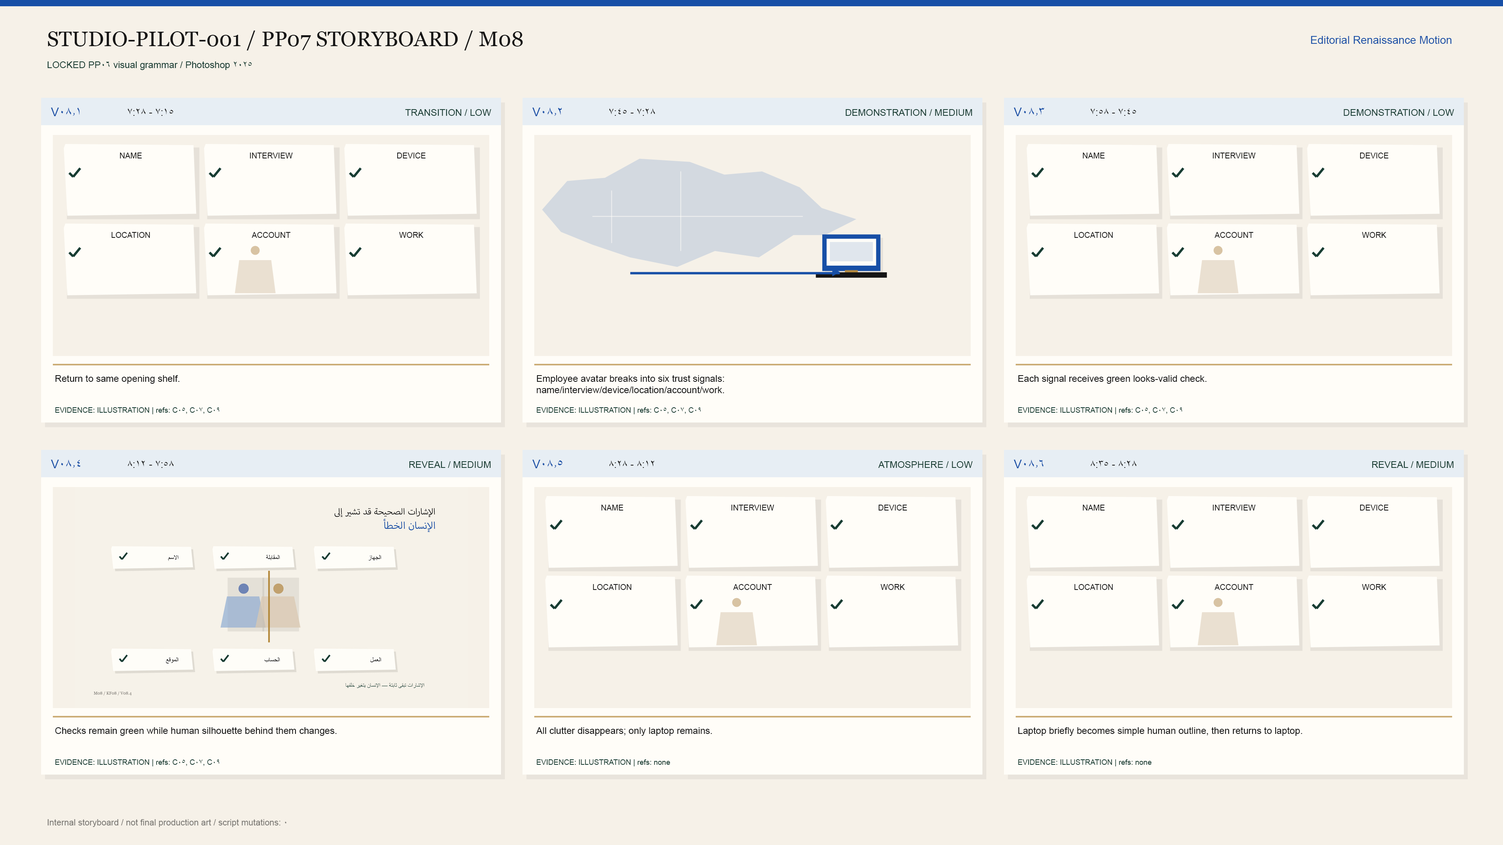
<style>
.page{position:relative;width:1503px;height:845px;background:#f6f1e8}
.page>*{position:absolute;margin:0}
.t1{font:21.1px "Georgia";color:#151515}
.t2{font:11px "ArialMT";color:#174fa6}
.t3{font:9.4px "ArialMT";color:#173c32}
.t4{font:12.1px "ArialMT";color:#174fa6}
.t5{font:10.2px "ArialMT";color:#151515}
.t6{font:7.8px "ArialMT";color:#151515}
.t7{font:20.9px "ArialMT";color:#d8c3a3}
.t8{font:9.4px "ArialMT";color:#151515}
.t9{font:7.4px "ArialMT";color:#173c32}
.t10{font:8.6px "ArialMT";color:#7b7974}
</style>
<div class="page">
<p class="t1" style="left:48px;top:31px;width:475px;height:19px">STUDIO-PILOT-001 / PP07 STORYBOARD / M08</p>
<p class="t2" style="left:1310px;top:36px;width:141px;height:8px">Editorial Renaissance Motion</p>
<p class="t3" style="left:47px;top:61px;width:205px;height:9px">LOCKED PP06 visual grammar / Photoshop 2025</p>
<p class="t4" style="left:51px;top:108px;width:29px;height:8px">V08.1</p>
<p class="t5" style="left:128px;top:108px;width:45px;height:8px">7:15 - 7:28</p>
<p class="t3" style="left:405px;top:109px;width:86px;height:7px">TRANSITION / LOW</p>
<p class="t4" style="left:532px;top:108px;width:30px;height:8px">V08.2</p>
<p class="t5" style="left:609px;top:108px;width:46px;height:8px">7:28 - 7:45</p>
<p class="t3" style="left:845px;top:109px;width:127px;height:7px">DEMONSTRATION / MEDIUM</p>
<p class="t4" style="left:1013px;top:108px;width:31px;height:8px">V08.3</p>
<p class="t5" style="left:1090px;top:108px;width:46px;height:8px">7:45 - 7:58</p>
<p class="t3" style="left:1343px;top:109px;width:111px;height:7px">DEMONSTRATION / LOW</p>
<p class="t6" style="left:120px;top:153px;width:22px;height:5px">NAME</p>
<p class="t6" style="left:250px;top:153px;width:43px;height:5px">INTERVIEW</p>
<p class="t6" style="left:397px;top:153px;width:29px;height:5px">DEVICE</p>
<p class="t6" style="left:1082px;top:153px;width:23px;height:5px">NAME</p>
<p class="t6" style="left:1212px;top:153px;width:43px;height:5px">INTERVIEW</p>
<p class="t6" style="left:1359px;top:153px;width:29px;height:5px">DEVICE</p>
<p class="t6" style="left:112px;top:232px;width:38px;height:6px">LOCATION</p>
<p class="t6" style="left:252px;top:232px;width:38px;height:6px">ACCOUNT</p>
<p class="t6" style="left:399px;top:232px;width:24px;height:6px">WORK</p>
<p class="t6" style="left:1074px;top:232px;width:38px;height:6px">LOCATION</p>
<p class="t6" style="left:1214px;top:232px;width:39px;height:6px">ACCOUNT</p>
<p class="t6" style="left:1362px;top:232px;width:24px;height:6px">WORK</p>
<p class="t7" style="left:250px;top:246px;width:10px;height:9px">●</p>
<p class="t7" style="left:1213px;top:246px;width:9px;height:9px">●</p>
<p class="t8" style="left:55px;top:375px;width:125px;height:9px">Return to same opening shelf.</p>
<p class="t8" style="left:536px;top:375px;width:188px;height:18px">Employee avatar breaks into six trust signals:<br>name/interview/device/location/account/work.</p>
<p class="t8" style="left:1018px;top:375px;width:188px;height:9px">Each signal receives green looks-valid check.</p>
<p class="t9" style="left:55px;top:407px;width:165px;height:7px">EVIDENCE: ILLUSTRATION | refs: C05, C07, C09</p>
<p class="t9" style="left:536px;top:407px;width:165px;height:7px">EVIDENCE: ILLUSTRATION | refs: C05, C07, C09</p>
<p class="t9" style="left:1018px;top:407px;width:164px;height:7px">EVIDENCE: ILLUSTRATION | refs: C05, C07, C09</p>
<p class="t4" style="left:51px;top:460px;width:30px;height:8px">V08.4</p>
<p class="t5" style="left:128px;top:461px;width:46px;height:7px">7:58 - 8:12</p>
<p class="t3" style="left:409px;top:461px;width:82px;height:7px">REVEAL / MEDIUM</p>
<p class="t4" style="left:532px;top:460px;width:30px;height:8px">V08.5</p>
<p class="t5" style="left:609px;top:461px;width:45px;height:7px">8:12 - 8:28</p>
<p class="t3" style="left:878px;top:461px;width:94px;height:7px">ATMOSPHERE / LOW</p>
<p class="t4" style="left:1013px;top:460px;width:30px;height:8px">V08.6</p>
<p class="t5" style="left:1091px;top:461px;width:45px;height:7px">8:28 - 8:35</p>
<p class="t3" style="left:1372px;top:461px;width:81px;height:7px">REVEAL / MEDIUM</p>
<p class="t6" style="left:601px;top:505px;width:22px;height:6px">NAME</p>
<p class="t6" style="left:731px;top:505px;width:43px;height:6px">INTERVIEW</p>
<p class="t6" style="left:878px;top:505px;width:29px;height:6px">DEVICE</p>
<p class="t6" style="left:1082px;top:505px;width:23px;height:6px">NAME</p>
<p class="t6" style="left:1212px;top:505px;width:43px;height:6px">INTERVIEW</p>
<p class="t6" style="left:1359px;top:505px;width:29px;height:6px">DEVICE</p>
<p class="t6" style="left:593px;top:584px;width:38px;height:6px">LOCATION</p>
<p class="t6" style="left:733px;top:584px;width:39px;height:6px">ACCOUNT</p>
<p class="t6" style="left:880px;top:584px;width:25px;height:6px">WORK</p>
<p class="t6" style="left:1074px;top:584px;width:38px;height:6px">LOCATION</p>
<p class="t6" style="left:1214px;top:584px;width:39px;height:6px">ACCOUNT</p>
<p class="t6" style="left:1362px;top:584px;width:24px;height:6px">WORK</p>
<p class="t7" style="left:732px;top:598px;width:9px;height:9px">●</p>
<p class="t7" style="left:1213px;top:598px;width:9px;height:9px">●</p>
<p class="t8" style="left:55px;top:727px;width:282px;height:9px">Checks remain green while human silhouette behind them changes.</p>
<p class="t8" style="left:536px;top:727px;width:176px;height:9px">All clutter disappears; only laptop remains.</p>
<p class="t8" style="left:1018px;top:727px;width:284px;height:9px">Laptop briefly becomes simple human outline, then returns to laptop.</p>
<p class="t9" style="left:55px;top:760px;width:165px;height:7px">EVIDENCE: ILLUSTRATION | refs: C05, C07, C09</p>
<p class="t9" style="left:536px;top:760px;width:134px;height:7px">EVIDENCE: ILLUSTRATION | refs: none</p>
<p class="t9" style="left:1018px;top:760px;width:133px;height:7px">EVIDENCE: ILLUSTRATION | refs: none</p>
<p class="t10" style="left:47px;top:819px;width:239px;height:8px">Internal storyboard / not final production art / script mutations: 0</p>
</div>
